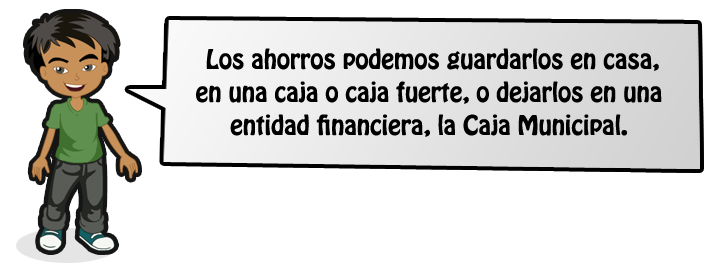
<style>
.page{position:relative;width:722px;height:270px;background:#ffffff}
.page>*{position:absolute;margin:0}
.t1{font:24px/33px "HoboStd";color:#000000}
</style>
<div class="page">
<p class="t1" style="left:196px;top:48px;width:466px;height:89px;text-align:center">Los ahorros podemos guardarlos en casa,<br>en una caja o caja fuerte, o dejarlos en una<br>entidad financiera, la Caja Municipal.</p>
</div>
